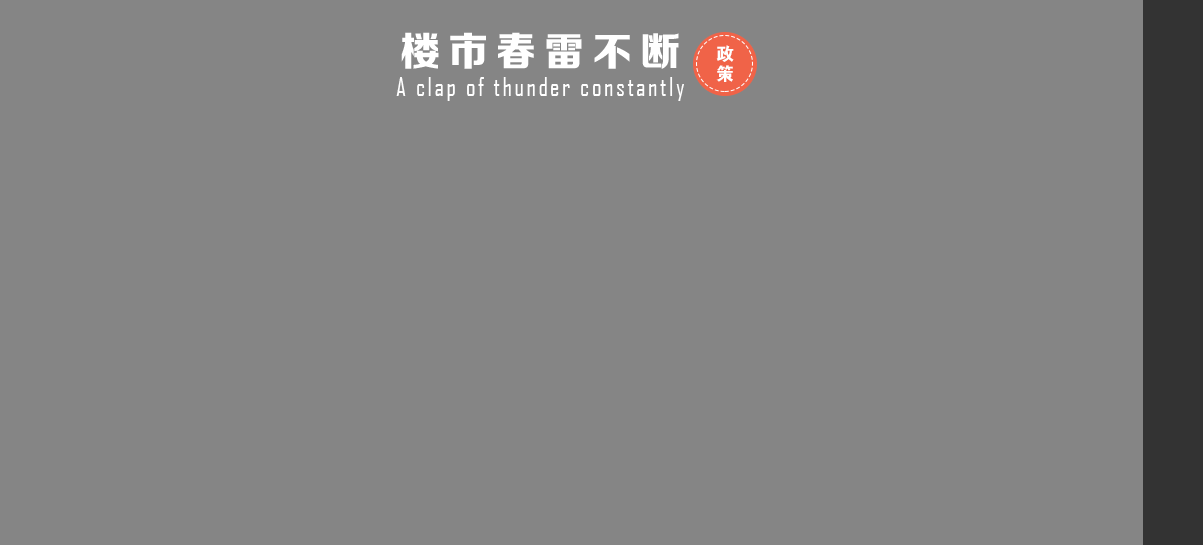
<style>
.page{position:relative;width:1203px;height:545px;background:#858585}
.page>*{position:absolute;margin:0}
.t1{font:40px "FZZDHJW--GB1-0";letter-spacing:0.2em;color:#ffffff}
.t2{font:18px "FZDHTJW--GB1-0";letter-spacing:0.1em;color:#ffffff}
.t3{font:25px "AgencyFB-Reg";letter-spacing:0.1em;color:#ffffff}
</style>
<div class="page">
<p class="t1" style="left:401px;top:32px;width:278px;height:37px">楼市春雷不断</p>
<p class="t2" style="left:716px;top:45px;width:18px;height:37px">政策</p>
<p class="t3" style="left:396px;top:77px;width:288px;height:24px">A clap of thunder constantly</p>
</div>
